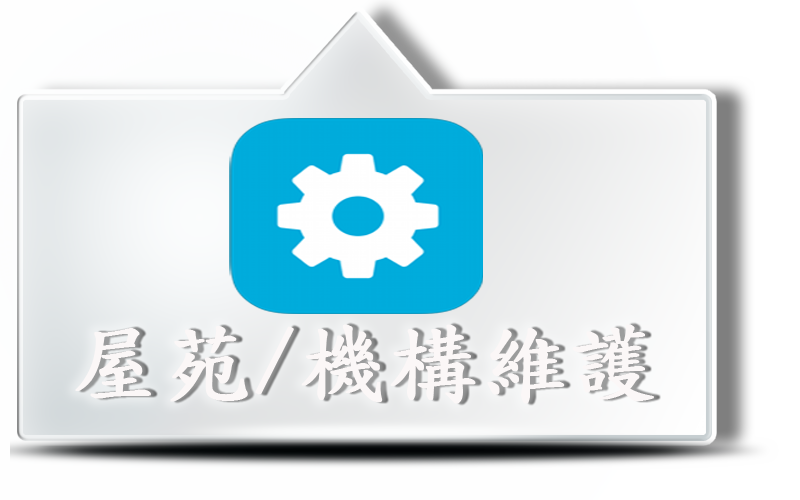
<style>
.page{position:relative;width:800px;height:500px}
.page>*{position:absolute;margin:0}
.t1{font:88px "DFKaiShu-SB-Estd-BF";color:#fcf7f7;font-weight:bold}
</style>
<div class="page">
<p class="t1" style="left:75px;top:324px;width:579px;height:80px">屋苑/機構維護</p>
</div>
